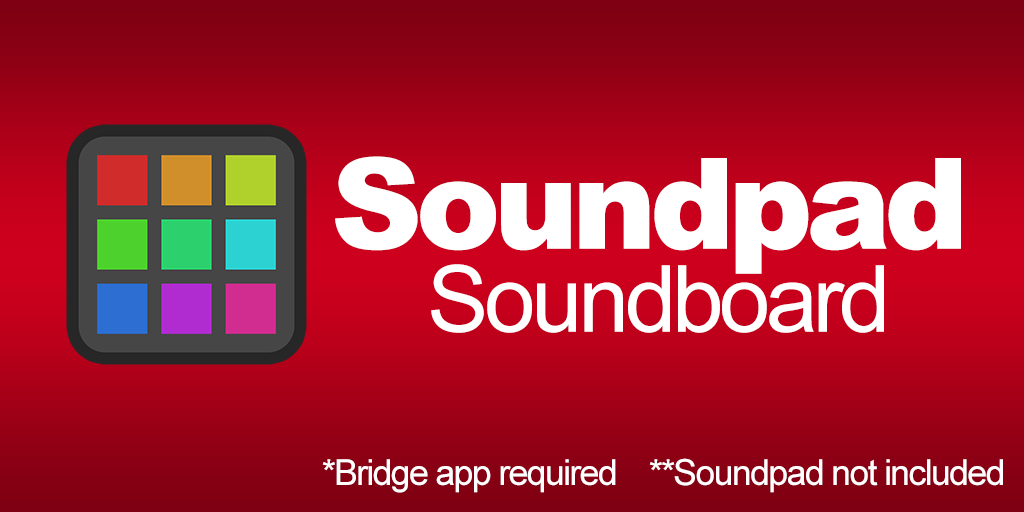
<style>
.page{position:relative;width:1024px;height:512px}
.page>*{position:absolute;margin:0}
.t1{font:126.5px "Arial-Black";letter-spacing:-0.05em;color:#ffffff}
.t2{font:92.8px "ArialMT";letter-spacing:-0.05em;color:#ffffff}
.t3{font:36px "ArialMT";letter-spacing:-0.05em;color:#ffffff}
</style>
<div class="page">
<p class="t1" style="left:335px;top:156px;width:626px;height:118px">Soundpad</p>
<p class="t2" style="left:431px;top:264px;width:453px;height:69px">Soundboard</p>
<p class="t3" style="left:322px;top:458px;width:681px;height:35px">*Bridge app required    **Soundpad not included</p>
</div>
